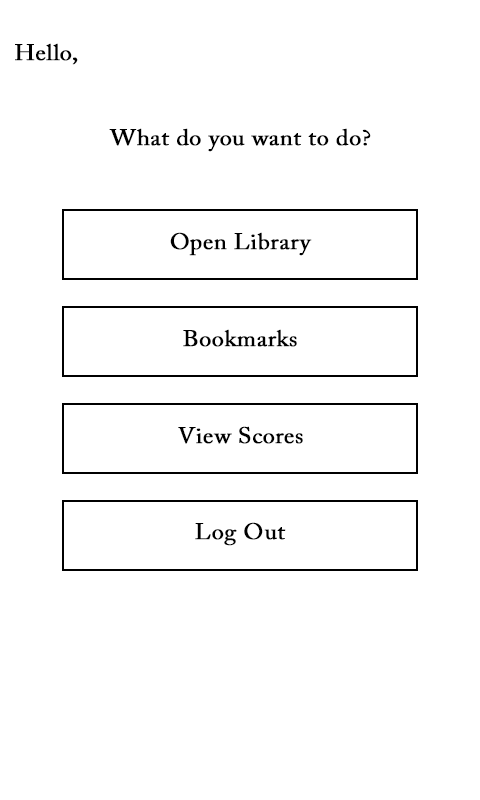
<style>
.page{position:relative;width:480px;height:800px;background:#ffffff}
.page>*{position:absolute;margin:0}
.t1{font:22.5px "ACaslonPro-Regular";color:#000000;font-weight:bold;scale:1.07 1}
</style>
<div class="page">
<p class="t1" style="left:15px;top:43px;width:63px;height:22px">Hello,</p>
<p class="t1" style="left:109px;top:128px;width:262px;height:24px">What do you want to do?</p>
<p class="t1" style="left:170px;top:232px;width:142px;height:24px">Open Library</p>
<p class="t1" style="left:183px;top:329px;width:114px;height:18px">Bookmarks</p>
<p class="t1" style="left:178px;top:426px;width:125px;height:18px">View Scores</p>
<p class="t1" style="left:195px;top:522px;width:91px;height:24px">Log Out</p>
</div>
